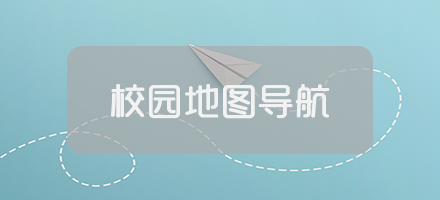
<style>
.page{position:relative;width:440px;height:200px}
.page>*{position:absolute;margin:0}
.t1{font:36px "RTWSYueRoudGoDemo-Regular";color:#f2f2f2;font-weight:bold}
</style>
<div class="page">
<p class="t1" style="left:110px;top:84px;width:220px;height:35px">校园地图导航</p>
</div>
